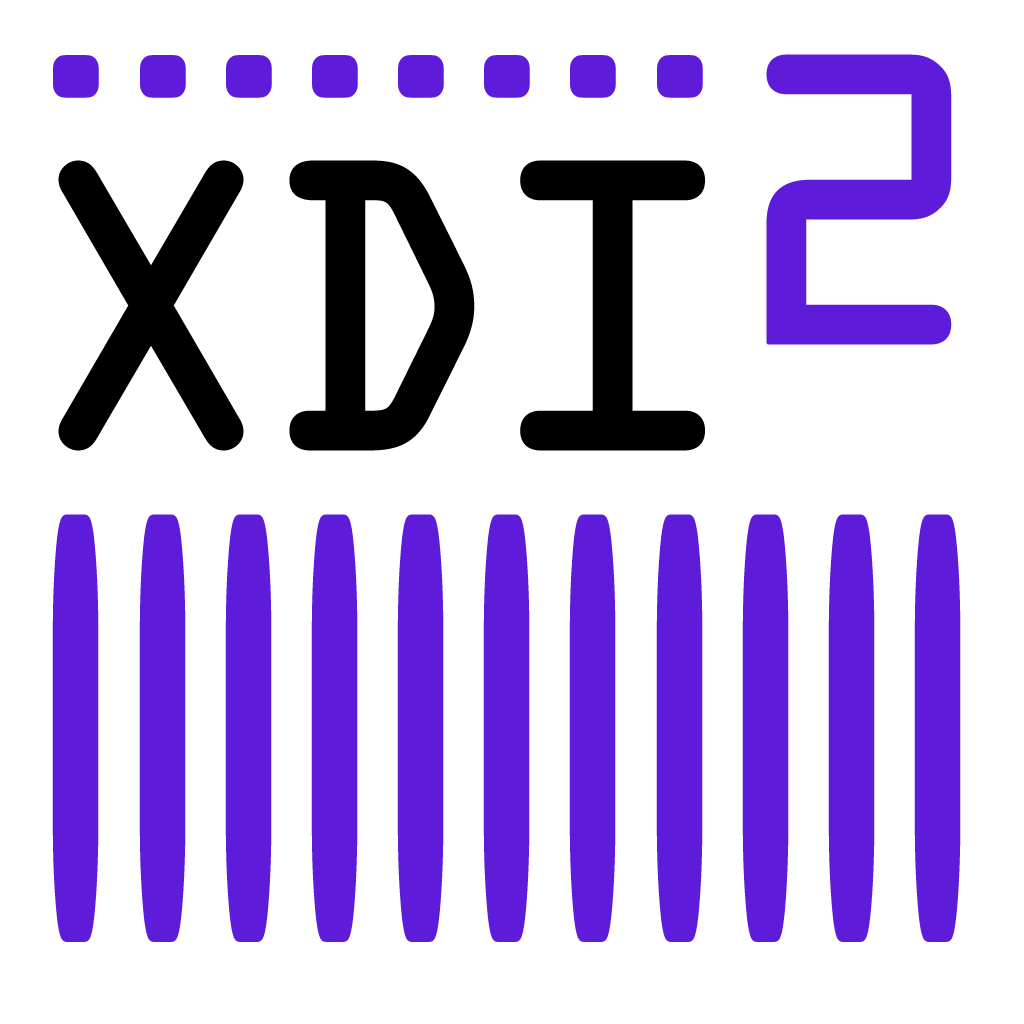
<style>
.page{position:relative;width:1024px;height:1024px;background:#ffffff}
.page>*{position:absolute;margin:0}
.t1{font:368.3px "OCRAStd";color:#5e1bda;font-weight:bold}
.t2{font:221px "OCRAStd";letter-spacing:-0.357em;color:#5e1bda;font-weight:bold}
.t3{font:368.3px "OCRAStd";letter-spacing:-0.12em;color:#000000;font-weight:bold}
.t4{font:2312.6px "OCRAStd";letter-spacing:-0.357em;color:#5e1bda;font-weight:bold;scale:0.1 1}
</style>
<div class="page">
<p class="t1" style="left:766px;top:54px;width:186px;height:291px">2</p>
<p class="t2" style="left:53px;top:55px;width:650px;height:43px">........</p>
<p class="t3" style="left:58px;top:160px;width:647px;height:291px">XDI</p>
<p class="t4" style="left:52px;top:514px;width:909px;height:428px">...........</p>
</div>
